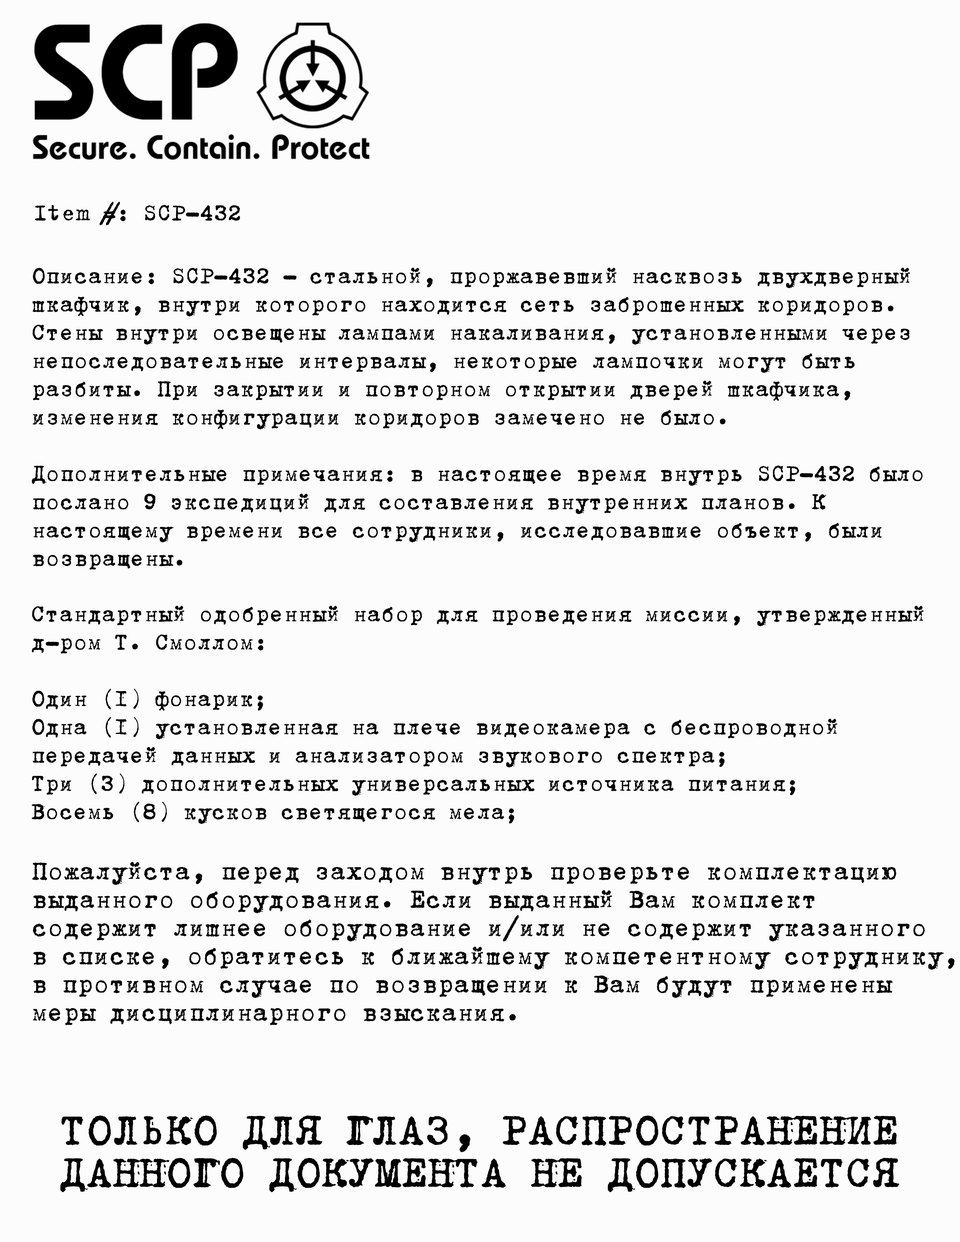
<style>
.page{position:relative;width:960px;height:1242px;background:#fcfcfc}
.page>*{position:absolute;margin:0}
.t1{font:25.1px "B52";color:#000000}
.t2{font:25.1px/28.2px "B52";color:#000000}
.t3{font:28.2px/28.2px "B52";color:#000000}
.t4{font:47.1px/42.4px "B52";color:#000000}
</style>
<div class="page">
<p class="t1" style="left:35px;top:202px;width:205px;height:23px">Item #: SCP-432</p>
<p class="t2" style="left:32px;top:268px;width:891px;height:302px">Описание: SCP-432 - стальной, проржавевший насквозь двухдверный <br>шкафчик, внутри которого находится сеть заброшенных коридоров. <br>Стены внутри освещены лампами накаливания, установленными через <br>непоследовательные интервалы, некоторые лампочки могут быть <br>разбиты. При закрытии и повторном открытии дверей шкафчика, <br>изменения конфигурации коридоров замечено не было.<br><br>Дополнительные примечания: в настоящее время внутрь SCP-432 было <br>послано 9 экспедиций для составления внутренних планов. К <br>настоящему времени все сотрудники, исследовавшие объект, были <br>возвращены.</p>
<p class="t2" style="left:32px;top:606px;width:892px;height:218px">Стандартный одобренный набор для проведения миссии, утвержденный <br>д-ром Т. Смоллом:<br><br>Один (1) фонарик;<br>Одна (1) установленная на плече видеокамера с беспроводной <br>передачей данных и анализатором звукового спектра;<br>Три (3) дополнительных универсальных источника питания;<br>Восемь (8) кусков светящегося мела;</p>
<p class="t3" style="left:32px;top:862px;width:923px;height:163px">Пожалуйста, перед заходом внутрь проверьте комплектацию <br>выданного оборудования. Если выданный Вам комплект <br>содержит лишнее оборудование и/или не содержит указанного <br>в списке, обратитесь к ближайшему компетентному сотруднику,<br>в противном случае по возвращении к Вам будут применены <br>меры дисциплинарного взыскания.</p>
<p class="t4" style="left:60px;top:1116px;width:840px;height:77px">ТОЛЬКО ДЛЯ ГЛАЗ, РАСПРОСТРАНЕНИЕ<br>ДАННОГО ДОКУМЕНТА НЕ ДОПУСКАЕТСЯ</p>
</div>
